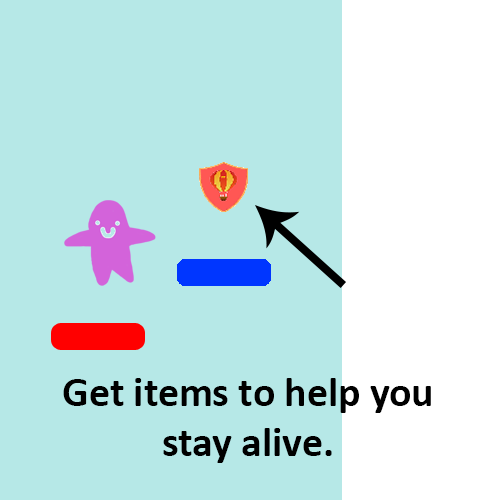
<style>
.page{position:relative;width:500px;height:500px;background:#b6e8e7}
.page>*{position:absolute;margin:0}
.t1{font:41.7px "Calibri-Bold";color:#000000}
</style>
<div class="page">
<p class="t1" style="left:63px;top:378px;width:368px;height:85px;text-align:center">Get items to help you<br>stay alive.</p>
</div>
